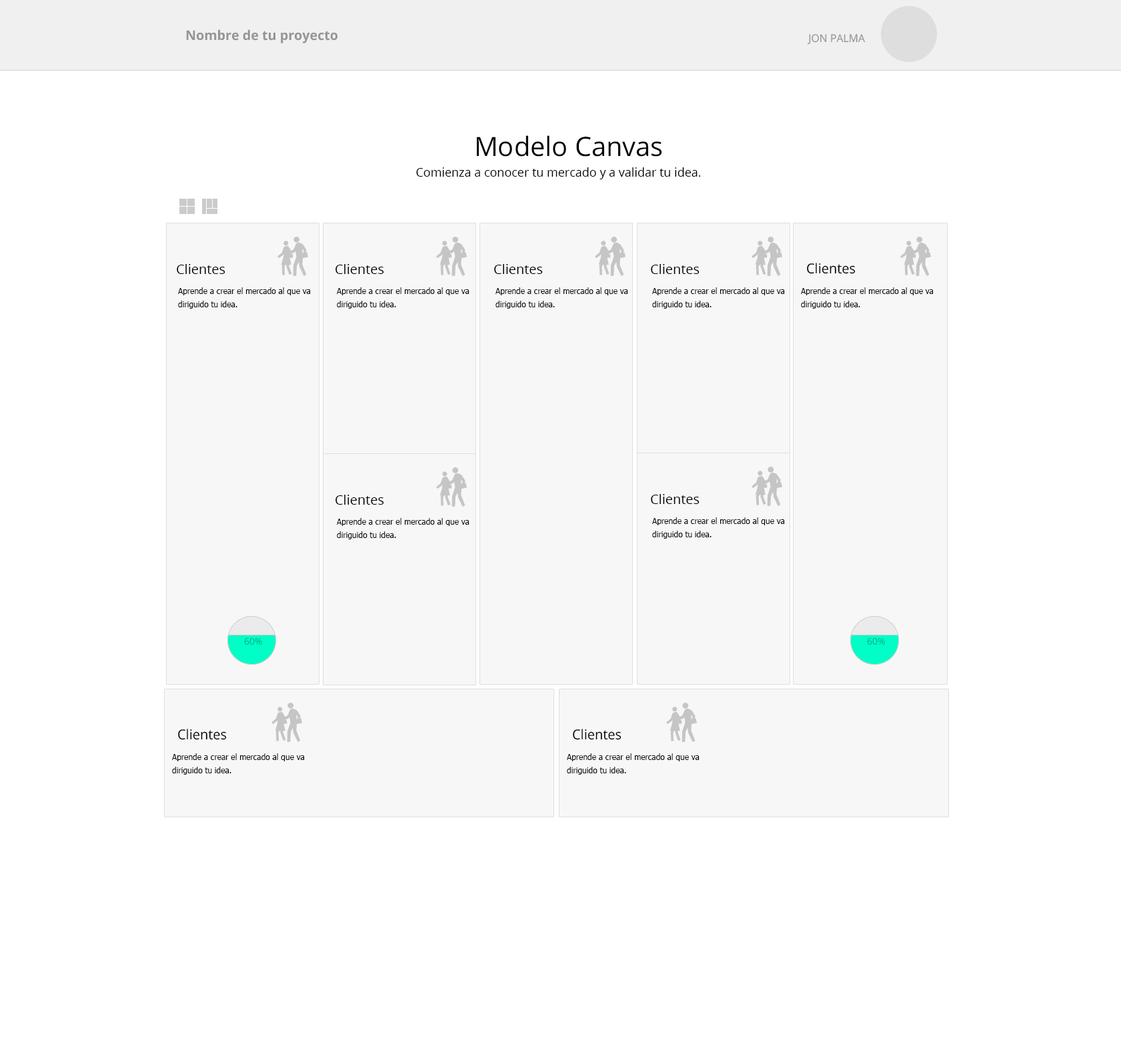
<style>
.page{position:relative;width:1121px;height:1064px;background:#ffffff}
.page>*{position:absolute;margin:0}
.t1{font:13.3px "OpenSans-Bold";color:#959595}
.t2{font:10.7px "OpenSans";color:#959595}
.t3{font:26.7px "OpenSans";color:#000000}
.t4{font:12px "OpenSans";color:#000000}
.t5{font:13.3px "OpenSans";color:#000000}
.t6{font:13.6px "OpenSans";color:#000000}
.t7{font:8px/13.3px "Tahoma";color:#000000}
.t8{font:9.3px "OpenSans";color:#00b88e}
</style>
<div class="page">
<p class="t1" style="left:186px;top:29px;width:151px;height:14px">Nombre de tu proyecto</p>
<p class="t2" style="left:807px;top:34px;width:58px;height:11px">JON PALMA</p>
<p class="t3" style="left:477px;top:135px;width:185px;height:22px">Modelo Canvas</p>
<p class="t4" style="left:416px;top:167px;width:285px;height:12px">Comienza a conocer tu mercado y a validar tu idea.</p>
<p class="t5" style="left:177px;top:264px;width:48px;height:10px">Clientes</p>
<p class="t5" style="left:335px;top:264px;width:49px;height:10px">Clientes</p>
<p class="t5" style="left:494px;top:264px;width:49px;height:10px">Clientes</p>
<p class="t5" style="left:651px;top:264px;width:48px;height:10px">Clientes</p>
<p class="t6" style="left:807px;top:263px;width:48px;height:11px">Clientes</p>
<p class="t7" style="left:178px;top:287px;width:133px;height:22px">Aprende a crear el mercado al que va diriguido tu idea.</p>
<p class="t7" style="left:337px;top:287px;width:132px;height:22px">Aprende a crear el mercado al que va diriguido tu idea.</p>
<p class="t7" style="left:495px;top:287px;width:133px;height:22px">Aprende a crear el mercado al que va diriguido tu idea.</p>
<p class="t7" style="left:652px;top:287px;width:133px;height:22px">Aprende a crear el mercado al que va diriguido tu idea.</p>
<p class="t7" style="left:801px;top:287px;width:132px;height:22px">Aprende a crear el mercado al que va diriguido tu idea.</p>
<p class="t5" style="left:335px;top:495px;width:49px;height:10px">Clientes</p>
<p class="t5" style="left:651px;top:494px;width:48px;height:10px">Clientes</p>
<p class="t7" style="left:337px;top:518px;width:132px;height:21px">Aprende a crear el mercado al que va diriguido tu idea.</p>
<p class="t7" style="left:652px;top:517px;width:133px;height:22px">Aprende a crear el mercado al que va diriguido tu idea.</p>
<p class="t8" style="left:244px;top:638px;width:18px;height:7px">60%</p>
<p class="t8" style="left:867px;top:638px;width:18px;height:7px">60%</p>
<p class="t6" style="left:178px;top:729px;width:49px;height:11px">Clientes</p>
<p class="t6" style="left:573px;top:729px;width:48px;height:11px">Clientes</p>
<p class="t7" style="left:172px;top:753px;width:133px;height:22px">Aprende a crear el mercado al que va diriguido tu idea.</p>
<p class="t7" style="left:567px;top:753px;width:132px;height:22px">Aprende a crear el mercado al que va diriguido tu idea.</p>
</div>
